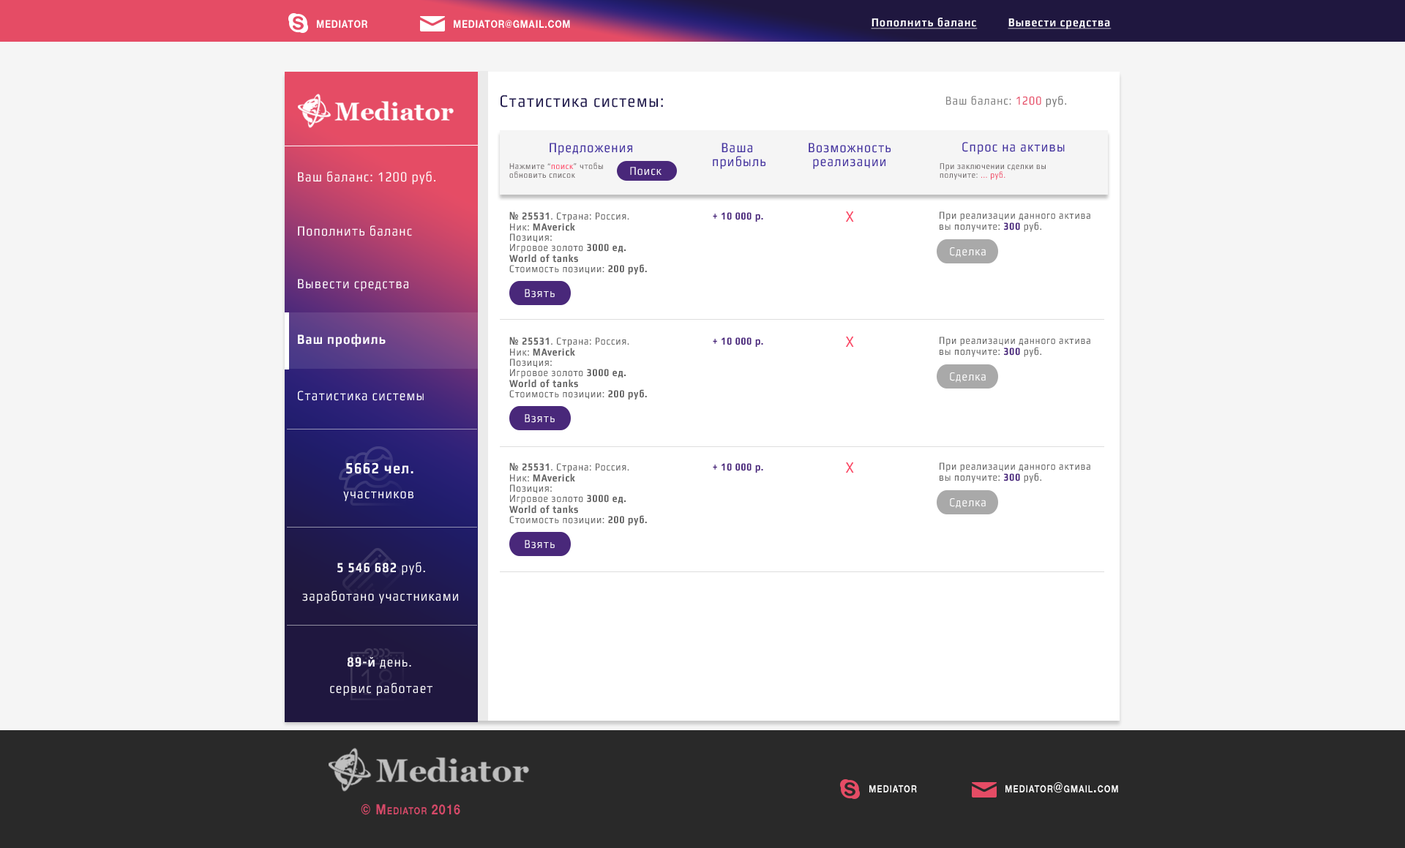
<style>
.page{position:relative;width:1405px;height:848px;background:#f5f5f5}
.page>*{position:absolute;margin:0}
.t1{font:12.3px "Play-Bold";letter-spacing:0.075em;color:#ffffff;text-decoration:underline;scale:0.83 1}
.t2{font:10.5px "HelveticaNeueCyr-Bold";letter-spacing:0.075em;color:#ffffff;scale:0.83 1}
.t3{font:17.6px "Play";letter-spacing:0.075em;color:#1f194a;scale:0.83 1}
.t4{font:12.3px "Play";letter-spacing:0.075em;color:#808080;scale:0.83 1}
.t5{font:12.3px "Play";letter-spacing:0.075em;color:#e54c65;scale:0.83 1}
.t6{font:12.3px "Play";letter-spacing:0.075em;color:#717171;scale:0.83 1}
.t7{font:14.1px "Play";letter-spacing:0.075em;color:#42319d;scale:0.83 1}
.t8{font:14.1px "Play";letter-spacing:0.075em;color:#ffffff;scale:0.83 1}
.t9{font:8.8px "Play";letter-spacing:0.075em;color:#6f6a6b;scale:0.83 1}
.t10{font:8.8px "Play";letter-spacing:0.075em;color:#ff4866;scale:0.83 1}
.t11{font:12.3px "Play";letter-spacing:0.075em;color:#ffffff;scale:0.83 1}
.t12{font:8.8px "Play";letter-spacing:0.075em;color:#f04762;scale:0.83 1}
.t13{font:10.5px "Play";letter-spacing:0.075em;color:#616161;scale:0.83 1}
.t14{font:10.5px "OpenSans-Bold";letter-spacing:0.075em;color:#616161;scale:0.83 1}
.t15{font:10.5px "Play-Bold";letter-spacing:0.075em;color:#616161;scale:0.83 1}
.t16{font:10.5px "Play-Bold";letter-spacing:0.075em;color:#49287a;scale:0.83 1}
.t17{font:15.8px "Play";letter-spacing:0.075em;color:#fa4663;scale:0.83 1}
.t18{font:14.1px "Play-Bold";letter-spacing:0.075em;color:#ffffff;scale:0.83 1}
.t19{font:15.8px "Play-Bold";letter-spacing:0.075em;color:#ffffff;scale:0.83 1}
.t20{font:14.1px "HelveticaNeueCyr-Bold";letter-spacing:0.075em;color:#ffffff;font-variant:small-caps;scale:0.83 1}
.t21{font:14.1px "HelveticaNeueCyr-Bold";letter-spacing:0.075em;color:#d64968;font-variant:small-caps;scale:0.83 1}
</style>
<div class="page">
<p class="t1" style="left:871px;top:18px;width:107px;height:11px">Пополнить баланс</p>
<p class="t2" style="left:317px;top:20px;width:50px;height:8px">MEDIATOR</p>
<p class="t2" style="left:454px;top:20px;width:116px;height:8px">MEDIATOR@GMAIL.COM</p>
<p class="t1" style="left:1008px;top:18px;width:104px;height:11px">Вывести средства</p>
<p class="t3" style="left:501px;top:95px;width:162px;height:13px">Статистика системы:</p>
<p class="t4" style="left:947px;top:96px;width:120px;height:12px">Ваш баланс: <span class="t5">1200 </span><span class="t6">руб.</span></p>
<p class="t7" style="left:550px;top:143px;width:82px;height:12px">Предложения</p>
<p class="t7" style="left:713px;top:143px;width:53px;height:26px;text-align:center">Ваша <br>прибыль</p>
<p class="t7" style="left:809px;top:143px;width:82px;height:26px;text-align:center">Возможность<br>реализации</p>
<p class="t7" style="left:963px;top:142px;width:102px;height:12px">Спрос на активы</p>
<p class="t8" style="left:298px;top:171px;width:138px;height:13px">Ваш баланс: 1200 руб.</p>
<p class="t9" style="left:509px;top:163px;width:94px;height:15px">Нажмите “<span class="t10">поиск</span>” чтобы обновить список</p>
<p class="t11" style="left:630px;top:167px;width:32px;height:9px">Поиск</p>
<p class="t9" style="left:940px;top:163px;width:106px;height:17px">При заключении сделки вы получите: <span class="t12">... руб.</span></p>
<p class="t13" style="left:509px;top:212px;width:138px;height:63px"><span class="t14">№ </span><span class="t15">25531</span>. Страна: Россия.<br>Ник: <span class="t15">MAverick<br></span>Позиция:<br>Игровое золото <span class="t15">3000 ед.<br>World of tanks<br></span>Стоимость позиции: <span class="t15">200 руб.</span></p>
<p class="t16" style="left:713px;top:212px;width:50px;height:10px">+ 10 000 р.</p>
<p class="t17" style="left:846px;top:212px;width:8px;height:10px">Х</p>
<p class="t13" style="left:940px;top:212px;width:151px;height:20px">При реализации данного актива вы получите: <span class="t16">300 </span>руб.</p>
<p class="t8" style="left:298px;top:225px;width:114px;height:11px">Пополнить баланс</p>
<p class="t11" style="left:950px;top:247px;width:36px;height:11px">Сделка</p>
<p class="t8" style="left:298px;top:279px;width:110px;height:12px">Вывести средства</p>
<p class="t11" style="left:525px;top:289px;width:30px;height:9px">Взять</p>
<p class="t18" style="left:298px;top:334px;width:88px;height:13px">Ваш профиль</p>
<p class="t13" style="left:509px;top:337px;width:138px;height:63px"><span class="t14">№ </span><span class="t15">25531</span>. Страна: Россия.<br>Ник: <span class="t15">MAverick<br></span>Позиция:<br>Игровое золото <span class="t15">3000 ед.<br>World of tanks<br></span>Стоимость позиции: <span class="t15">200 руб.</span></p>
<p class="t16" style="left:713px;top:337px;width:50px;height:10px">+ 10 000 р.</p>
<p class="t17" style="left:846px;top:337px;width:8px;height:10px">Х</p>
<p class="t13" style="left:940px;top:337px;width:151px;height:20px">При реализации данного актива вы получите: <span class="t16">300 </span>руб.</p>
<p class="t11" style="left:950px;top:373px;width:36px;height:10px">Сделка</p>
<p class="t8" style="left:298px;top:391px;width:126px;height:10px">Статистика системы</p>
<p class="t11" style="left:525px;top:414px;width:30px;height:9px">Взять</p>
<p class="t19" style="left:346px;top:463px;width:68px;height:11px">5662 чел.</p>
<p class="t13" style="left:509px;top:463px;width:138px;height:63px"><span class="t14">№ </span><span class="t15">25531</span>. Страна: Россия.<br>Ник: <span class="t15">MAverick<br></span>Позиция:<br>Игровое золото <span class="t15">3000 ед.<br>World of tanks<br></span>Стоимость позиции: <span class="t15">200 руб.</span></p>
<p class="t16" style="left:713px;top:463px;width:50px;height:10px">+ 10 000 р.</p>
<p class="t17" style="left:846px;top:463px;width:8px;height:10px">Х</p>
<p class="t13" style="left:940px;top:463px;width:151px;height:20px">При реализации данного актива вы получите: <span class="t16">300 </span>руб.</p>
<p class="t8" style="left:343px;top:491px;width:71px;height:10px">участников</p>
<p class="t11" style="left:950px;top:499px;width:36px;height:10px">Сделка</p>
<p class="t11" style="left:525px;top:540px;width:30px;height:9px">Взять</p>
<p class="t18" style="left:337px;top:562px;width:88px;height:13px">5 546 682<span class="t8"> руб.</span></p>
<p class="t8" style="left:302px;top:591px;width:156px;height:13px">заработано участниками</p>
<p class="t8" style="left:348px;top:657px;width:63px;height:12px"><span class="t18">89-й</span> день.</p>
<p class="t8" style="left:330px;top:683px;width:103px;height:13px">сервис работает</p>
<p class="t20" style="left:870px;top:785px;width:47px;height:8px">mediator</p>
<p class="t20" style="left:1006px;top:783px;width:113px;height:11px">mediator@gmail.com</p>
<p class="t21" style="left:361px;top:804px;width:99px;height:11px">© Mediator 2016</p>
</div>
